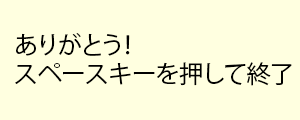
<style>
.page{position:relative;width:300px;height:120px;background:#ffffe0}
.page>*{position:absolute;margin:0}
.t1{font:24.4px "KozGoPr6N-Regular";color:#000000}
</style>
<div class="page">
<p class="t1" style="left:15px;top:33px;width:277px;height:53px">ありがとう！<br>スペースキーを押して終了</p>
</div>
